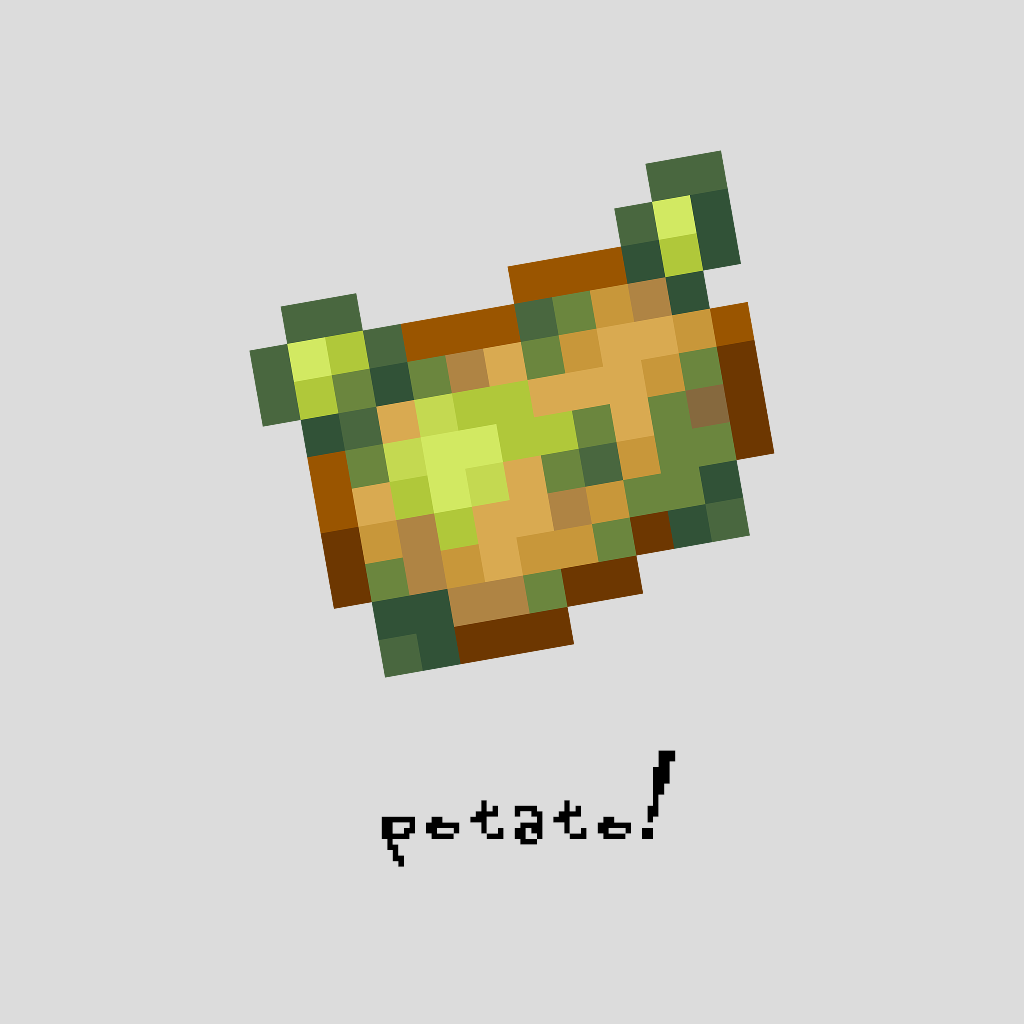
<style>
.page{position:relative;width:1024px;height:1024px;background:#dcdcdc}
.page>*{position:absolute;margin:0}
.t1{font:72px "POTATIS";color:#000000}
</style>
<div class="page">
<p class="t1" style="left:381px;top:750px;width:295px;height:117px">potato!</p>
</div>
